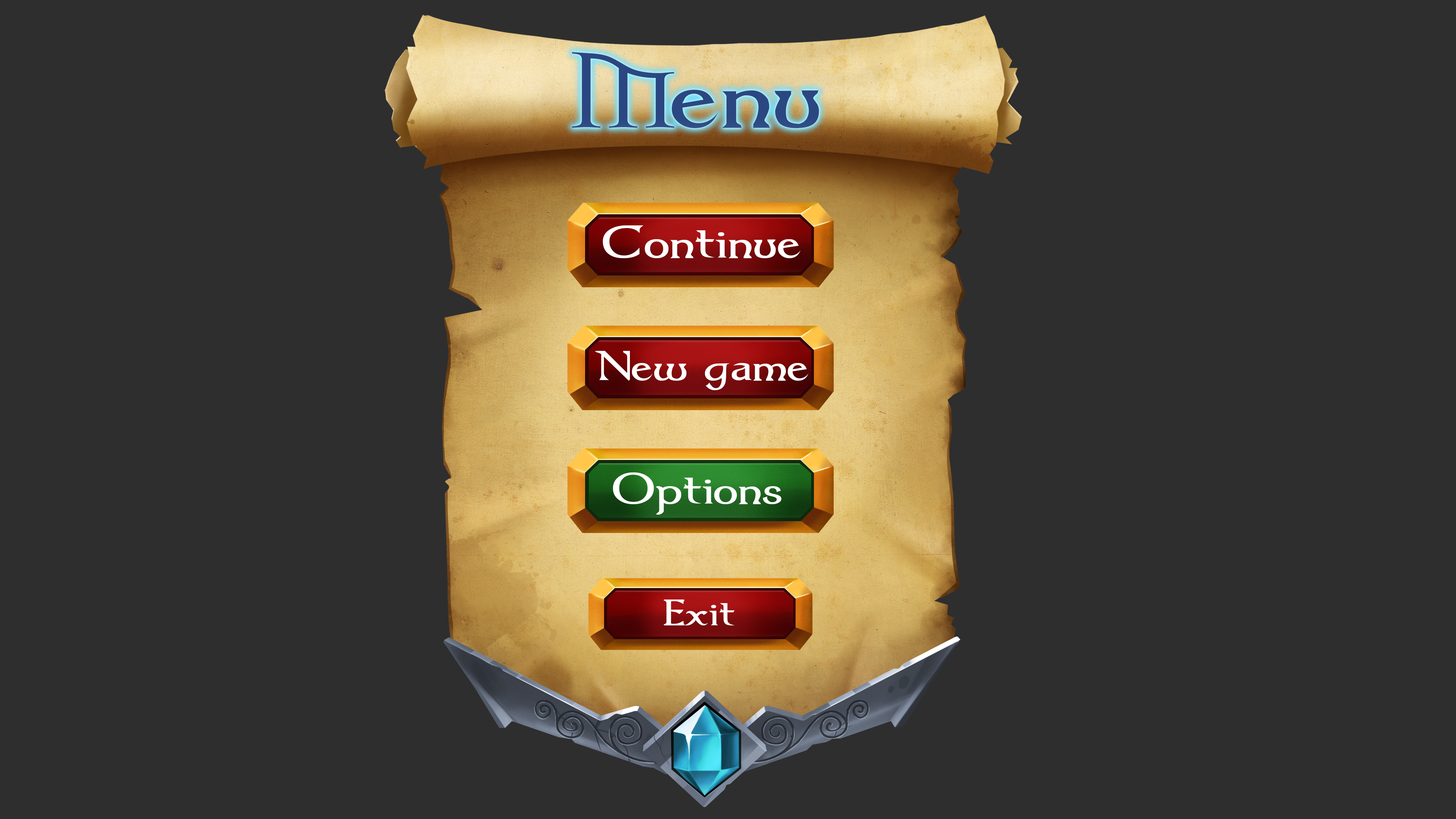
<style>
.page{position:relative;width:1456px;height:819px;background:#2e2e2e}
.page>*{position:absolute;margin:0}
.t1{font:108.6px "Dumbledor1";color:#2b4781;scale:1.18 1}
.t2{font:108.6px "Dark11";color:#2b4781;scale:1.18 1}
.t3{font:52.9px "Dumbledor1";color:#ffffff;scale:1.18 1}
.t4{font:48.6px "Dumbledor1";color:#ffffff;scale:1.18 1}
.t5{font:50.6px "Dumbledor1";color:#ffffff;scale:1.18 1}
.t6{font:42.4px "Dumbledor1";color:#ffffff;scale:1.18 1}
</style>
<div class="page">
<p class="t1" style="left:572px;top:52px;width:247px;height:76px"><span class="t2">M</span>enu</p>
<p class="t3" style="left:603px;top:225px;width:198px;height:33px">Continue</p>
<p class="t4" style="left:595px;top:351px;width:214px;height:39px">New game</p>
<p class="t5" style="left:613px;top:472px;width:169px;height:43px">Options</p>
<p class="t6" style="left:664px;top:599px;width:71px;height:26px">Exit</p>
</div>
